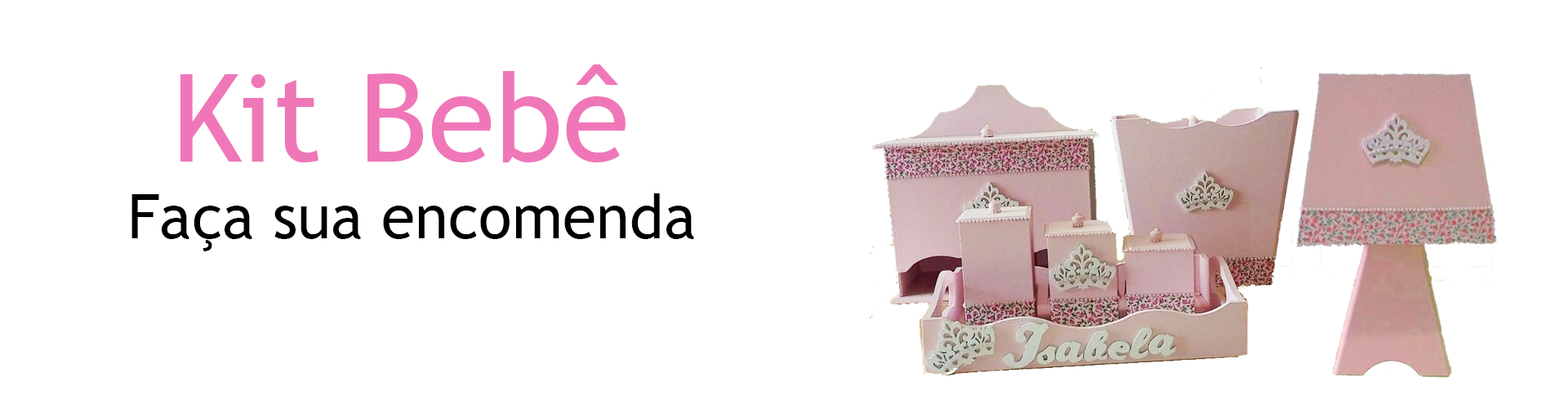
<style>
.page{position:relative;width:1568px;height:408px;background:#ffffff}
.page>*{position:absolute;margin:0}
.t1{font:122.5px "TrebuchetMS";color:#ef77b8}
.t2{font:61.2px "TrebuchetMS";color:#000000}
</style>
<div class="page">
<p class="t1" style="left:180px;top:65px;width:446px;height:98px">Kit Bebê</p>
<p class="t2" style="left:131px;top:194px;width:563px;height:58px">Faça sua encomenda</p>
</div>
